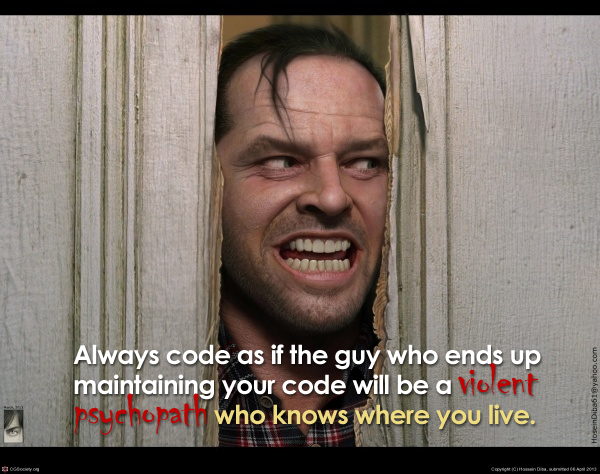
<style>
.page{position:relative;width:600px;height:474px}
.page>*{position:absolute;margin:0}
.t1{font:26px/30px "CenturyGothic-Bold";letter-spacing:-0.025em;color:#ffffff}
.t2{font:46px/30px "Chiller-Regular";letter-spacing:-0.025em;color:#c10202}
.t3{font:26px/30px "CenturyGothic-Bold";letter-spacing:-0.025em;color:#eedb81}
</style>
<div class="page">
<p class="t1" style="left:73px;top:344px;width:468px;height:91px">Always code as if the guy who ends up <br>maintaining your code will be a <span class="t2">violent <br>psychopath </span><span class="t3">who knows where you live.</span></p>
</div>
